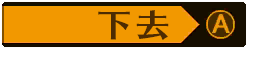
<style>
.page{position:relative;width:256px;height:64px;background:#f29800}
.page>*{position:absolute;margin:0}
.t1{font:32px "SkipStd-B";letter-spacing:0.125em;color:#4c2b02;scale:1.1 1}
</style>
<div class="page">
<p class="t1" style="left:98px;top:10px;width:71px;height:30px">下去</p>
</div>
